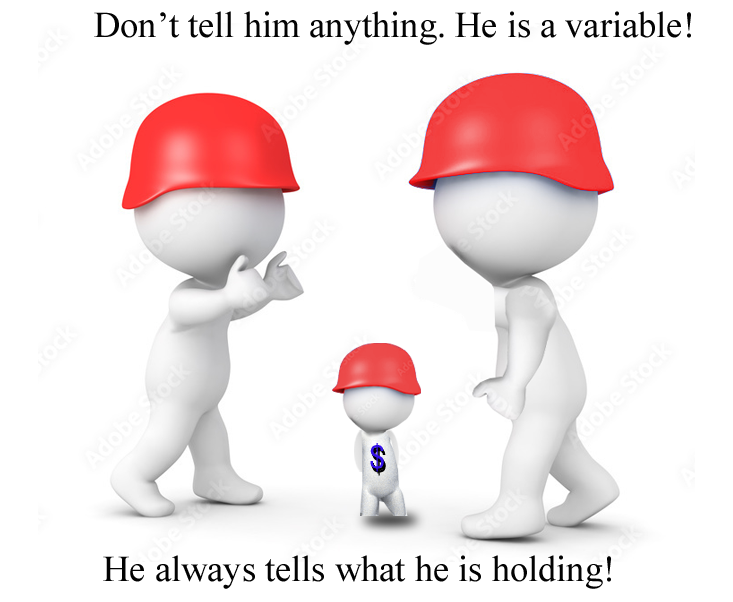
<style>
.page{position:relative;width:733px;height:602px;background:#ffffff}
.page>*{position:absolute;margin:0}
.t1{font:36.4px "TimesNewRomanPSMT";color:#030303}
.t2{font:30.7px "HelveticaLTStd-Cond";color:#3411ea}
.t3{font:30.7px "HelveticaLTStd-Cond"}
.t4{font:30.7px "HelveticaLTStd-Cond";color:#000000}
.t5{font:36.4px "TimesNewRomanPSMT";color:#020202}
</style>
<div class="page">
<p class="t1" style="left:94px;top:11px;width:597px;height:34px">Don’t tell him anything. He is a variable!</p>
<p class="t2" style="left:370px;top:443px;width:14px;height:29px">$</p>
<p class="t3" style="left:371px;top:445px;width:14px;height:29px">$</p>
<p class="t4" style="left:372px;top:447px;width:14px;height:29px">$</p>
<p class="t5" style="left:103px;top:555px;width:508px;height:34px">He always tells what he is holding!</p>
</div>
